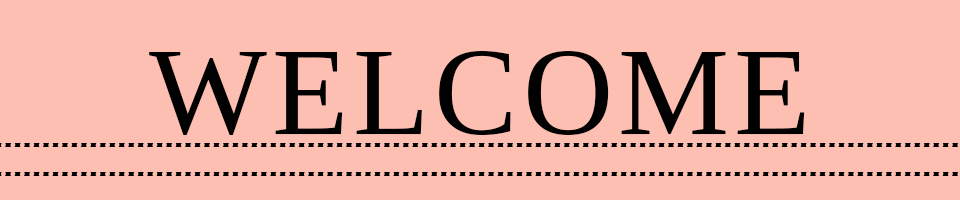
<style>
.page{position:relative;width:960px;height:200px;background:#fdbfb2}
.page>*{position:absolute;margin:0}
.t1{font:125px "Tinos-Regular";letter-spacing:0.04em;color:#010101;text-transform:uppercase}
</style>
<div class="page">
<p class="t1" style="left:149px;top:51px;width:656px;height:84px">welcome</p>
</div>
